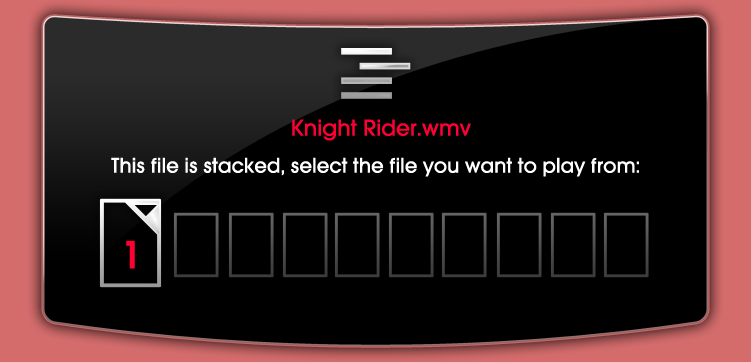
<style>
.page{position:relative;width:751px;height:362px;background:#000000}
.page>*{position:absolute;margin:0}
.t1{font:24px "AvantGardeMdITCTT";color:#ff0033}
.t2{font:22px "AvantGardeMdITCTT";color:#ffffff}
.t3{font:41.1px "AvantGardeITC-Demi";color:#ff0033}
</style>
<div class="page">
<p class="t1" style="left:292px;top:119px;width:179px;height:22px">Knight Rider.wmv</p>
<p class="t2" style="left:111px;top:157px;width:528px;height:20px">This file is stacked, select the file you want to play from:</p>
<p class="t3" style="left:126px;top:240px;width:9px;height:29px">1</p>
</div>
